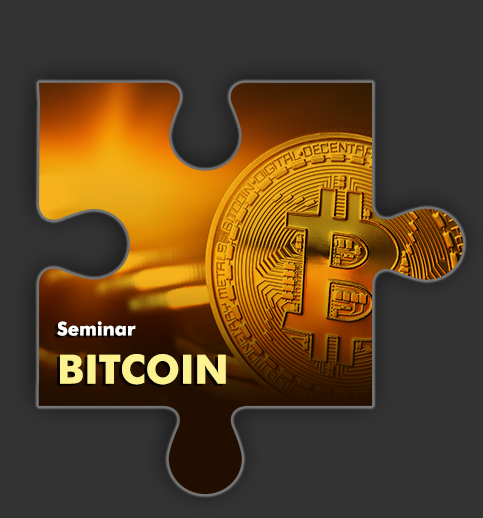
<style>
.page{position:relative;width:483px;height:518px;background:#333333}
.page>*{position:absolute;margin:0}
.t1{font:18.6px "FuturaBT-Bold";color:#fffffe}
.t2{font:40.2px "FuturaBT-Bold";color:#fcf390}
</style>
<div class="page">
<p class="t1" style="left:57px;top:321px;width:169px;height:64px">Seminar <br><span class="t2">BITCOIN</span></p>
</div>
